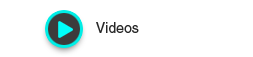
<style>
.page{position:relative;width:253px;height:57px;background:#ffffff}
.page>*{position:absolute;margin:0}
.t1{font:14px "Helvetica";color:#282828}
</style>
<div class="page">
<p class="t1" style="left:96px;top:22px;width:43px;height:11px">Videos</p>
</div>
